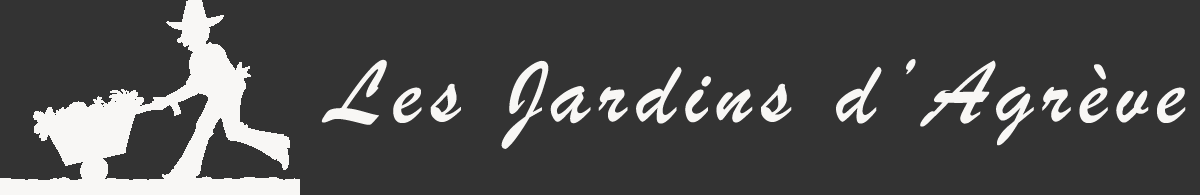
<style>
.page{position:relative;width:1200px;height:195px;background:#333333}
.page>*{position:absolute;margin:0}
.t1{font:95px "BrushScriptMT";letter-spacing:0.1em;color:#f8f7f5}
</style>
<div class="page">
<p class="t1" style="left:321px;top:59px;width:865px;height:90px">Les Jardins d’Agrève</p>
</div>
